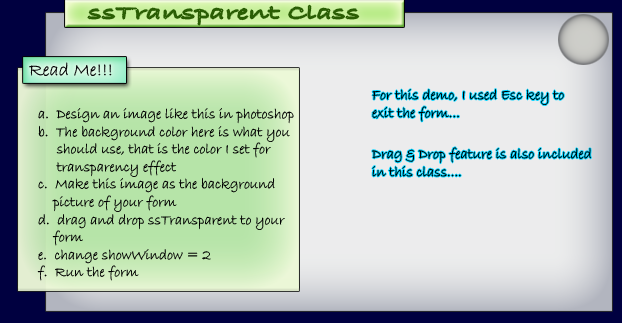
<style>
.page{position:relative;width:622px;height:323px;background:#ececed}
.page>*{position:absolute;margin:0}
.t1{font:19.5px "BradleyHandITC";color:#4b7c24;scale:1.63 1}
.t2{font:18.7px "BradleyHandITC";color:#050608}
.t3{font:14.7px "BradleyHandITC";color:#000000}
</style>
<div class="page">
<p class="t1" style="left:88px;top:5px;width:271px;height:20px">ssTransparent Class</p>
<p class="t2" style="left:29px;top:62px;width:83px;height:14px">Read Me!!!</p>
<p class="t3" style="left:372px;top:89px;width:192px;height:33px">For this demo, I used Esc key to <br>exit the form...</p>
<p class="t3" style="left:37px;top:108px;width:257px;height:173px">a.  Design an image like this in photoshop<br>b.  The background color here is what you <br>     should use, that is the color I set for <br>     transparency effect<br>c.  Make this image as the background <br>    picture of your form<br>d.  drag and drop ssTransparent to your <br>    form<br>e.  change showWindow = 2<br>f.  Run the form</p>
<p class="t3" style="left:372px;top:147px;width:219px;height:30px">Drag &amp; Drop feature is also included<br>in this class....</p>
</div>
